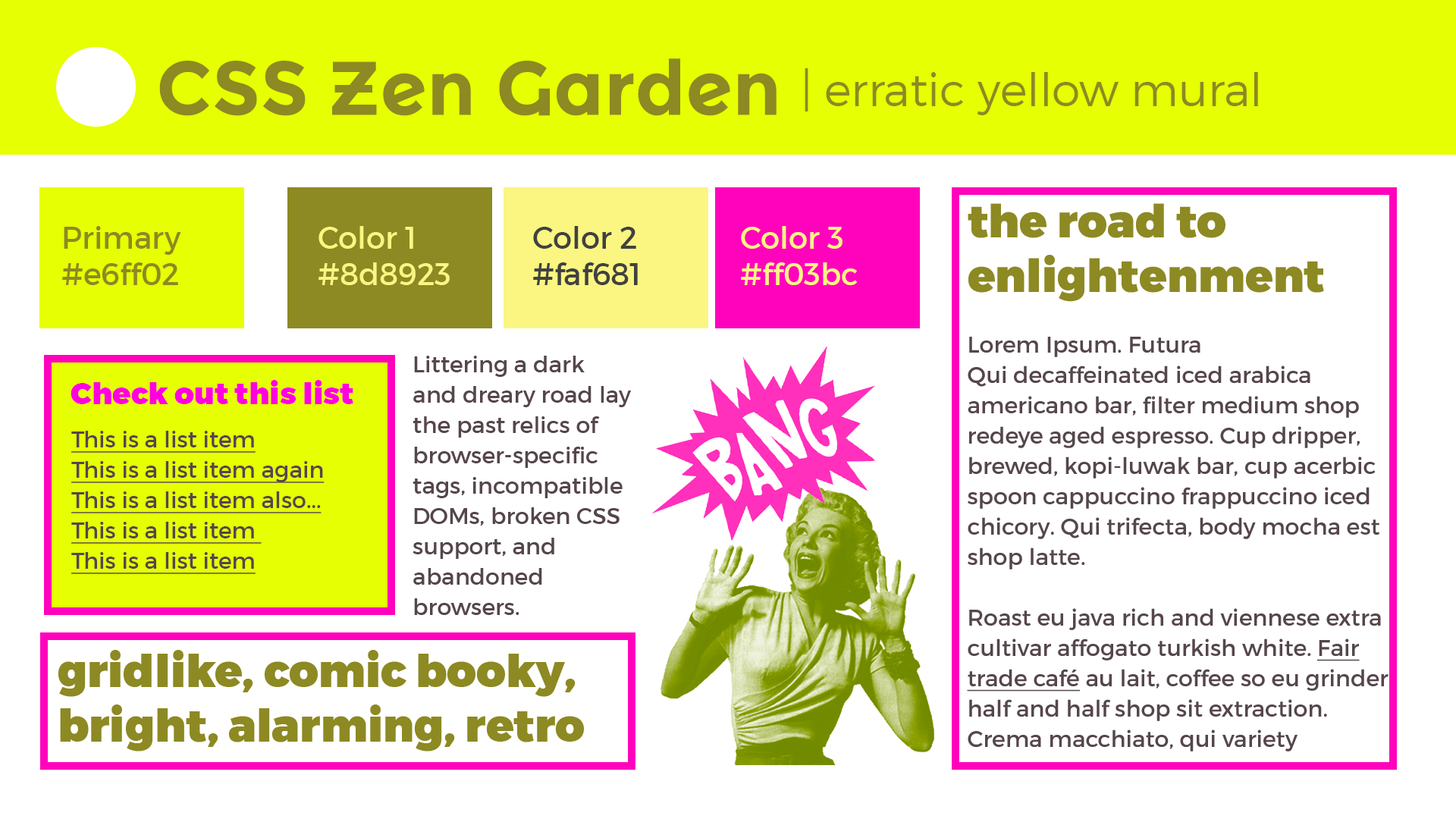
<style>
.page{position:relative;width:1456px;height:819px;background:#ffffff}
.page>*{position:absolute;margin:0}
.t1{font:75.8px "MontserratAlternates-Bold";color:#8d8923}
.t2{font:45.5px "Montserrat-Light";color:#8d8923}
.t3{font:22.7px/30.3px "Montserrat-Regular";color:#55464b}
.t4{font:45.5px "Montserrat-Black";color:#8d8923}
.t5{font:22.7px/30.3px "Montserrat-Regular";color:#55464b;text-decoration:underline}
.t6{font:21.2px "Montserrat-Regular";color:#55464b}
.t7{font:30.3px "Montserrat-Regular";color:#8d8923}
.t8{font:30.3px "Montserrat-Regular";color:#faf681}
.t9{font:30.3px "Montserrat-Regular";color:#414141}
.t10{font:30.3px "Montserrat-Black";color:#ff00de}
</style>
<div class="page">
<p class="t1" style="left:159px;top:58px;width:618px;height:58px">CSS Zen Garden</p>
<p class="t2" style="left:805px;top:68px;width:453px;height:47px">| erratic yellow mural</p>
<p class="t3" style="left:967px;top:203px;width:421px;height:548px"><span class="t4">the road to enlightenment<br></span><br>Lorem Ipsum. Futura<br>Qui decaffeinated iced arabica americano bar, filter medium shop redeye aged espresso. Cup dripper, brewed, kopi-luwak bar, cup acerbic spoon cappuccino frappuccino iced chicory. Qui trifecta, body mocha est shop latte.<br><br>Roast eu java rich and viennese extra cultivar affogato turkish white. <span class="t5">Fair trade café</span> au lait, coffee so eu grinder half and half shop sit extraction. Crema macchiato, qui variety macchiato aromatic lungo, beans redeye et carajillo breve.<br><span class="t6"></span></p>
<p class="t7" style="left:62px;top:226px;width:119px;height:59px">Primary<br>#e6ff02</p>
<p class="t8" style="left:318px;top:226px;width:132px;height:59px">Color 1<br>#8d8923</p>
<p class="t9" style="left:533px;top:226px;width:105px;height:59px">Color 2<br>#faf681</p>
<p class="t8" style="left:741px;top:226px;width:117px;height:59px">Color 3<br>#ff03bc</p>
<p class="t3" style="left:413px;top:356px;width:219px;height:259px">Littering a dark and dreary road lay the past relics of browser-specific tags, incompatible DOMs, broken CSS support, and abandoned browsers.</p>
<p class="t10" style="left:71px;top:380px;width:282px;height:24px">Check out this list</p>
<p class="t5" style="left:71px;top:431px;width:254px;height:143px">This is a list item<br>This is a list item again<br>This is a list item also...<br>This is a list item <br>This is a list item</p>
<p class="t4" style="left:58px;top:650px;width:526px;height:101px">gridlike, comic booky,<br>bright, alarming, retro</p>
</div>
